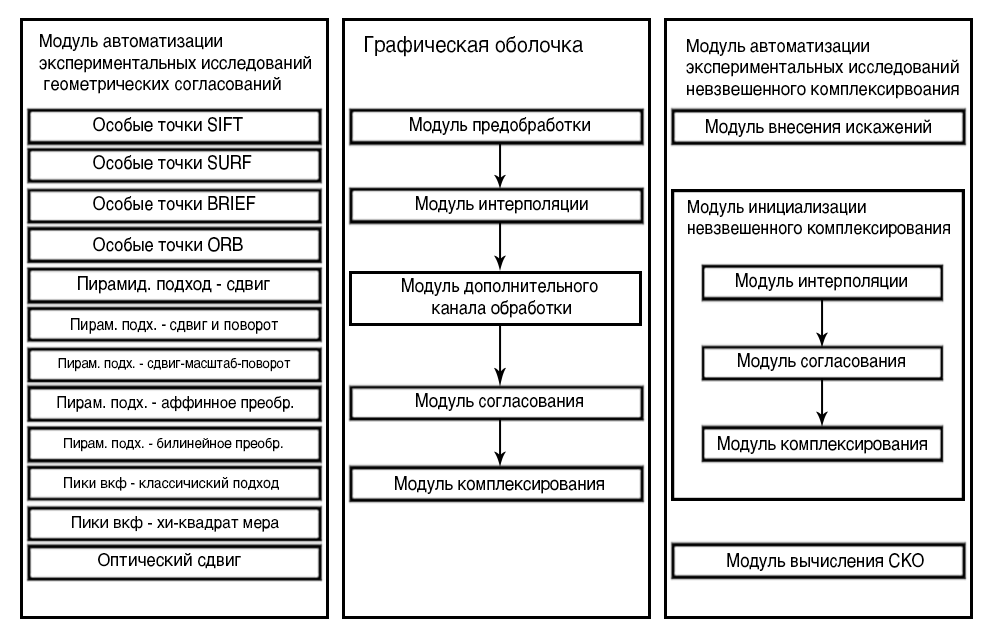
<style>
.page{position:relative;width:1000px;height:642px;background:#ffffff}
.page>*{position:absolute;margin:0}
.t1{font:17.9px "Helvetica-Regular";color:#000000;scale:0.92 1}
.t2{font:21.6px "Helvetica-Regular";color:#000000;scale:0.92 1}
.t3{font:18.1px "Helvetica-Regular";color:#000000;scale:0.92 1}
.t4{font:18.5px "Helvetica-Regular";color:#000000;scale:0.89 1}
.t5{font:18.7px "Helvetica-Regular";color:#000000;scale:0.88 1}
.t6{font:18.1px "Helvetica-Regular";color:#000000;scale:0.88 1}
.t7{font:18.5px "Helvetica-Regular";color:#000000;scale:0.88 1}
.t8{font:16.3px "Helvetica-Regular";color:#000000;scale:0.87 1}
.t9{font:14.2px "Helvetica-Regular";color:#000000;scale:0.9 1}
.t10{font:16.3px "Helvetica-Regular";color:#000000;scale:0.91 1}
.t11{font:14.2px "Helvetica-Regular";color:#000000;scale:0.94 1}
.t12{font:14.6px "Helvetica-Regular";color:#000000;scale:0.94 1}
.t13{font:16px "Helvetica-Regular";color:#000000;scale:0.97 1}
.t14{font:17.4px "Helvetica-Regular";color:#000000;scale:0.96 1}
</style>
<div class="page">
<p class="t1" style="left:39px;top:34px;width:272px;height:60px">Модуль автоматизации<br>экспериментальных исследований<br> геометрических согласований</p>
<p class="t2" style="left:365px;top:36px;width:218px;height:21px">Графическая оболочка</p>
<p class="t3" style="left:686px;top:39px;width:273px;height:60px">Модуль автоматизации<br>экспериментальных исследований<br>невзвешенного комплексирвоания</p>
<p class="t4" style="left:93px;top:117px;width:150px;height:15px">Особые точки SIFT</p>
<p class="t4" style="left:410px;top:117px;width:180px;height:18px">Модуль предобработки</p>
<p class="t5" style="left:706px;top:119px;width:225px;height:18px">Модуль внесения искажений</p>
<p class="t4" style="left:93px;top:155px;width:159px;height:15px">Особые точки SURF</p>
<p class="t4" style="left:93px;top:196px;width:163px;height:15px">Особые точки BRIEF</p>
<p class="t4" style="left:416px;top:196px;width:172px;height:18px">Модуль интерполяции</p>
<p class="t6" style="left:688px;top:200px;width:262px;height:38px">Модуль инициализации <br>невзвешенного комплексирования</p>
<p class="t4" style="left:93px;top:237px;width:150px;height:15px">Особые точки ORB</p>
<p class="t4" style="left:78px;top:276px;width:192px;height:18px">Пирамид. подход - сдвиг</p>
<p class="t7" style="left:402px;top:278px;width:196px;height:40px;text-align:center">Модуль дополнительного<br> канала обработки</p>
<p class="t5" style="left:736px;top:273px;width:171px;height:18px">Модуль интерполяции</p>
<p class="t8" style="left:71px;top:318px;width:207px;height:16px">Пирам. подх. - сдвиг и поворот</p>
<p class="t4" style="left:738px;top:353px;width:167px;height:18px">Модуль согласования</p>
<p class="t9" style="left:58px;top:358px;width:233px;height:14px">Пирам. подх. - сдвиг-масштаб-поворот</p>
<p class="t10" style="left:57px;top:396px;width:236px;height:16px">Пирам. подх. - аффинное преобр.</p>
<p class="t4" style="left:416px;top:393px;width:167px;height:18px">Модуль согласования</p>
<p class="t11" style="left:64px;top:438px;width:219px;height:14px">Пирам. подх. - билинейное преобр.</p>
<p class="t5" style="left:718px;top:436px;width:209px;height:18px">Модуль комплексирования</p>
<p class="t12" style="left:64px;top:477px;width:215px;height:14px">Пики вкф - классичиский подход</p>
<p class="t5" style="left:395px;top:476px;width:209px;height:18px">Модуль комплексирования</p>
<p class="t13" style="left:72px;top:516px;width:207px;height:16px">Пики вкф - хи-квадрат мера</p>
<p class="t14" style="left:98px;top:553px;width:143px;height:16px">Оптический сдвиг</p>
<p class="t5" style="left:727px;top:553px;width:197px;height:18px">Модуль вычисления СКО</p>
</div>
